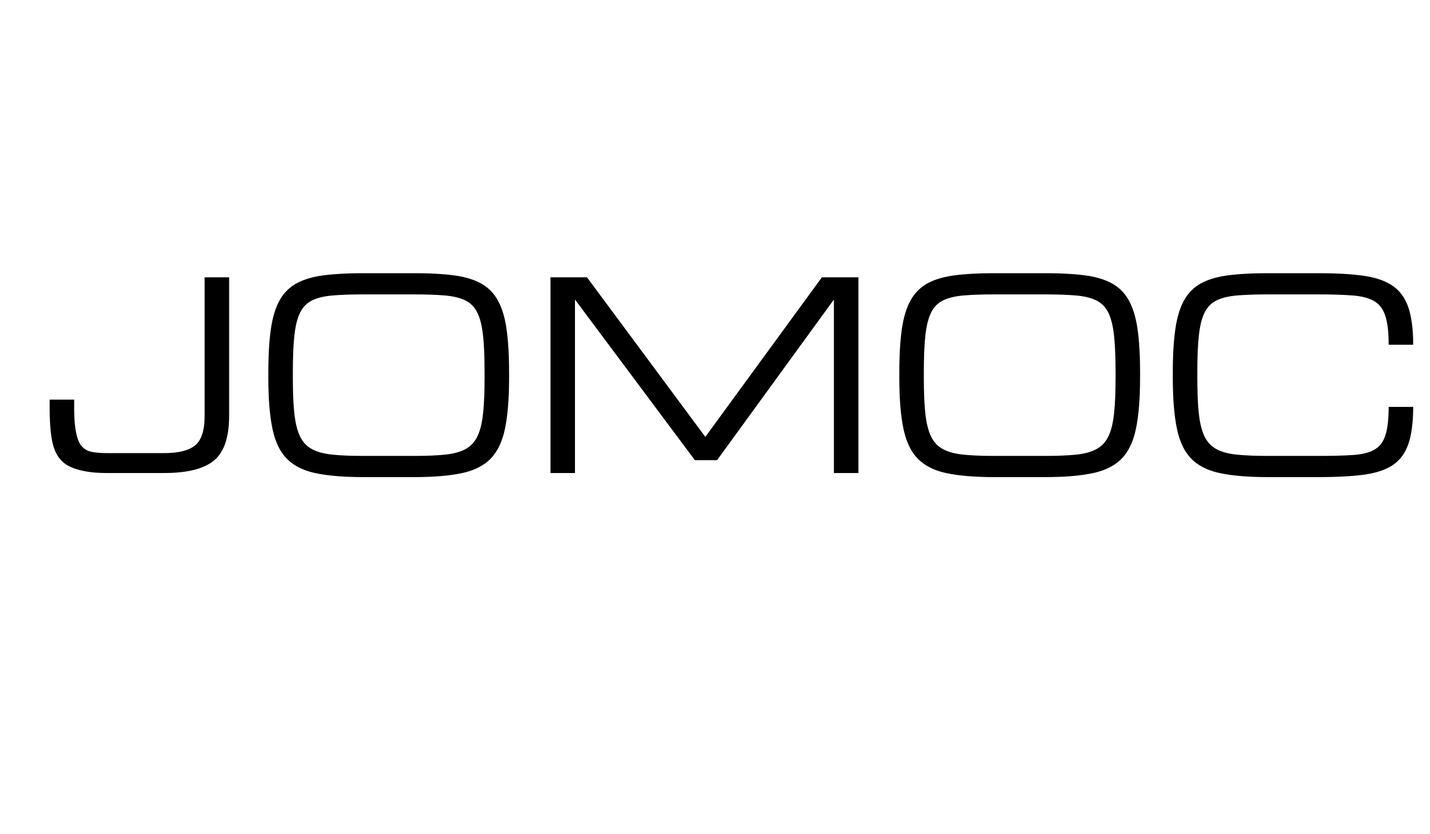
<style>
.page{position:relative;width:1430px;height:834px;background:#ffffff}
.page>*{position:absolute;margin:0}
.t1{font:260.9px "Michroma-Regular";color:#000000}
</style>
<div class="page">
<p class="t1" style="left:49px;top:273px;width:1364px;height:204px">JOMOC</p>
</div>
